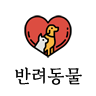
<style>
.page{position:relative;width:96px;height:96px;background:#ffffff}
.page>*{position:absolute;margin:0}
.t1{font:18px "GowunBatang-Regular";color:#000000;font-weight:bold}
</style>
<div class="page">
<p class="t1" style="left:15px;top:67px;width:67px;height:18px">반려동물</p>
</div>
